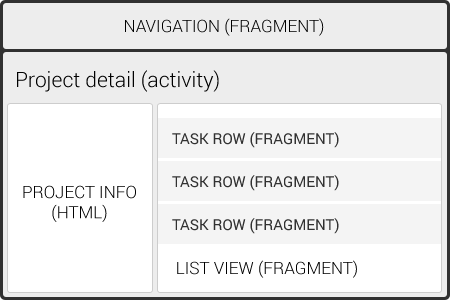
<style>
.page{position:relative;width:450px;height:300px;background:#ffffff}
.page>*{position:absolute;margin:0}
.t1{font:17px "Roboto-Light";color:#000000;text-transform:uppercase}
.t2{font:21px "Roboto-Light";color:#000000}
.t3{font:15px "Roboto-Regular";color:#313131;text-transform:uppercase}
</style>
<div class="page">
<p class="t1" style="left:125px;top:18px;width:199px;height:18px">Navigation (fragment)</p>
<p class="t2" style="left:17px;top:70px;width:202px;height:22px">Project detail (activity)</p>
<p class="t3" style="left:172px;top:132px;width:167px;height:16px">TASK row (Fragment)</p>
<p class="t1" style="left:23px;top:185px;width:113px;height:37px;text-align:center">PROJECT INFO<br>(HTML)</p>
<p class="t3" style="left:172px;top:175px;width:167px;height:16px">TASK row (Fragment)</p>
<p class="t3" style="left:172px;top:218px;width:167px;height:16px">TASK row (Fragment)</p>
<p class="t1" style="left:177px;top:260px;width:180px;height:18px">LIST VIEW (FRAGMENT)</p>
</div>
